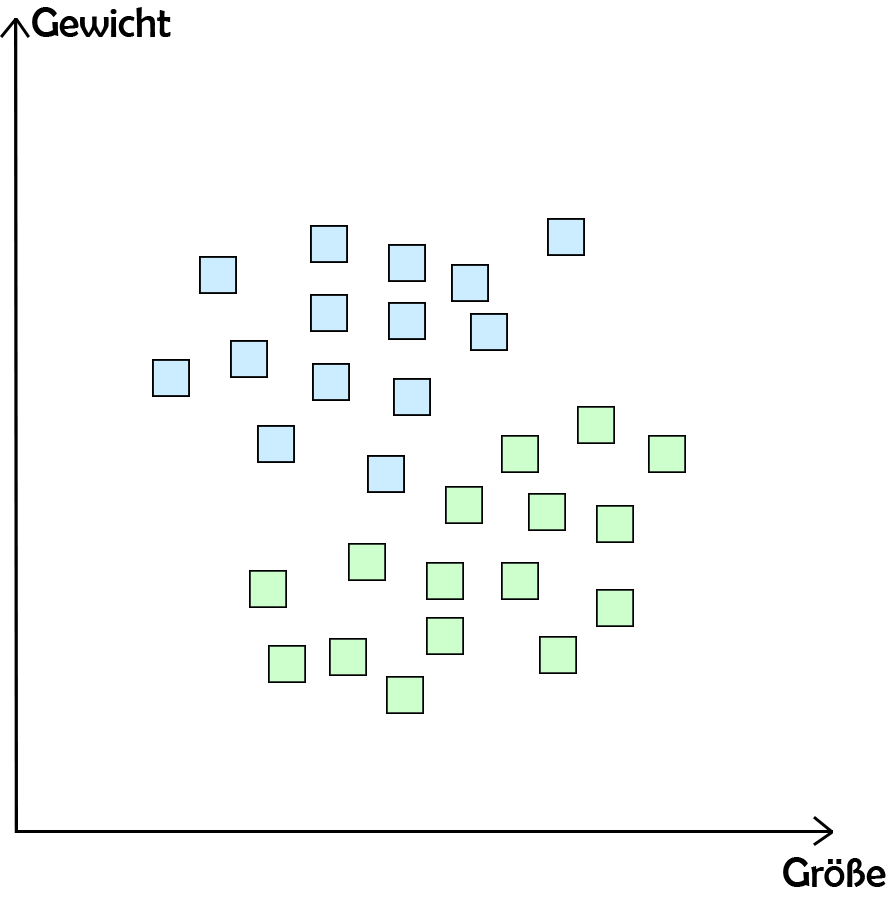
<style>
.page{position:relative;width:896px;height:900px;background:#ffffff}
.page>*{position:absolute;margin:0}
.t1{font:41.7px "BerlinSansFB-Reg";color:#000000}
</style>
<div class="page">
<p class="t1" style="left:32px;top:7px;width:139px;height:30px">Gewicht</p>
<p class="t1" style="left:783px;top:857px;width:103px;height:30px">Größe</p>
</div>
